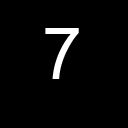
<style>
.page{position:relative;width:128px;height:128px;background:#000000}
.page>*{position:absolute;margin:0}
.t1{font:72px "ArialMT";color:#ffffff}
</style>
<div class="page">
<p class="t1" style="left:45px;top:28px;width:34px;height:51px">7</p>
</div>
